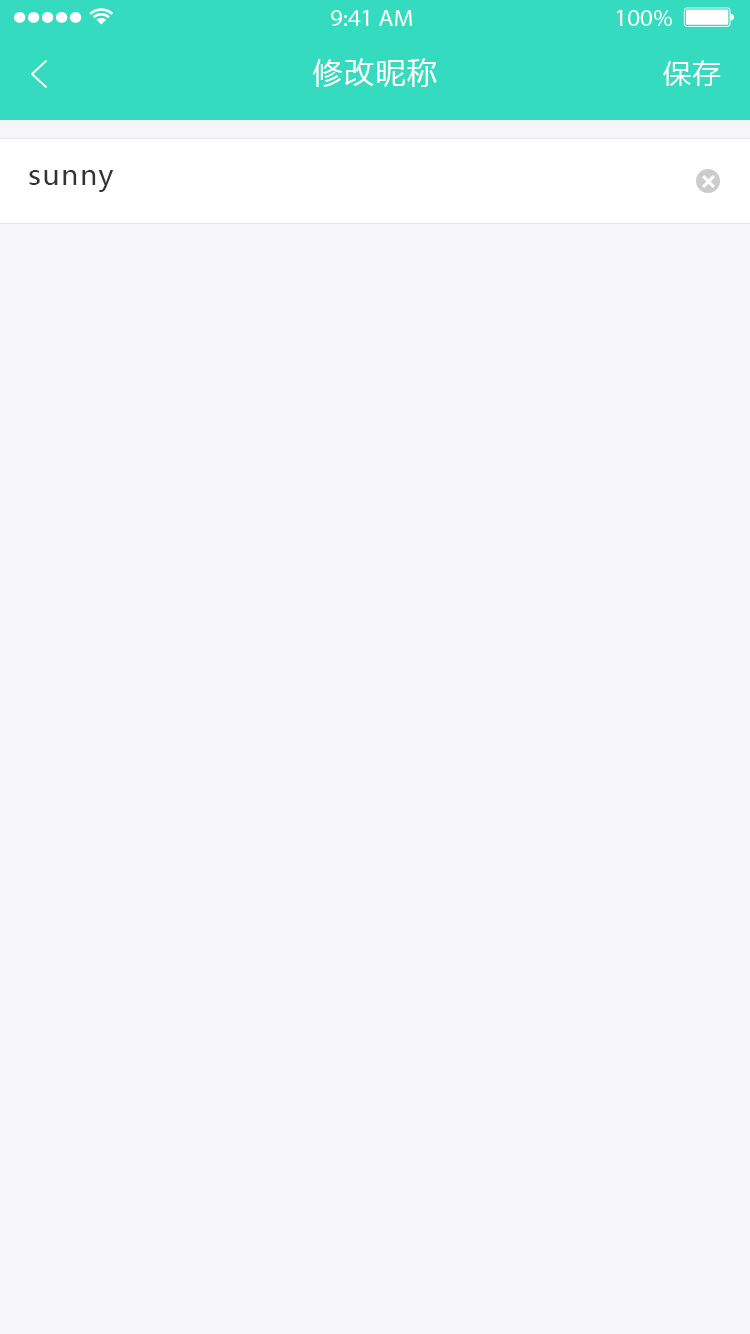
<style>
.page{position:relative;width:750px;height:1334px;background:#f6f6f9}
.page>*{position:absolute;margin:0}
.t1{font:30px "MicrosoftYaHei";letter-spacing:0.05em;color:#ffffff}
.t2{font:28px "MicrosoftYaHei";letter-spacing:0.05em;color:#ffffff}
.t3{font:28px "MicrosoftYaHei";letter-spacing:0.05em;color:#333333}
</style>
<div class="page">
<p class="t1" style="left:313px;top:58px;width:124px;height:29px">修改昵称</p>
<p class="t2" style="left:663px;top:60px;width:58px;height:26px">保存</p>
<p class="t3" style="left:29px;top:170px;width:85px;height:22px">sunny</p>
</div>
